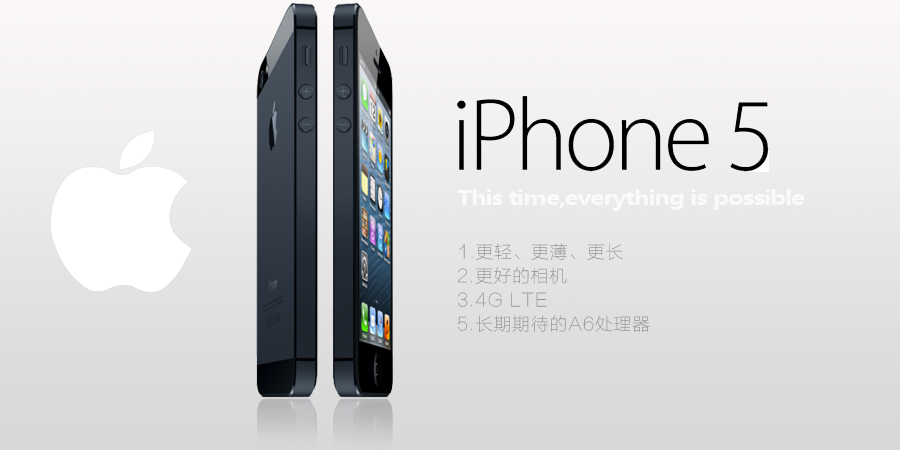
<style>
.page{position:relative;width:900px;height:450px}
.page>*{position:absolute;margin:0}
.t1{font:20px "MicrosoftYaHei-Bold";letter-spacing:-0.05em;color:#fcf9f9;scale:1.22 1}
.t2{font:18px/24px "FZLTCXHJW--GB1-0";letter-spacing:0.03em;color:#969494}
</style>
<div class="page">
<p class="t1" style="left:457px;top:189px;width:348px;height:22px">This time,everything is possible</p>
<p class="t2" style="left:457px;top:243px;width:193px;height:90px">1.更轻、更薄、更长<br>2.更好的相机<br>3.4G LTE<br>5.长期期待的A6处理器</p>
</div>
